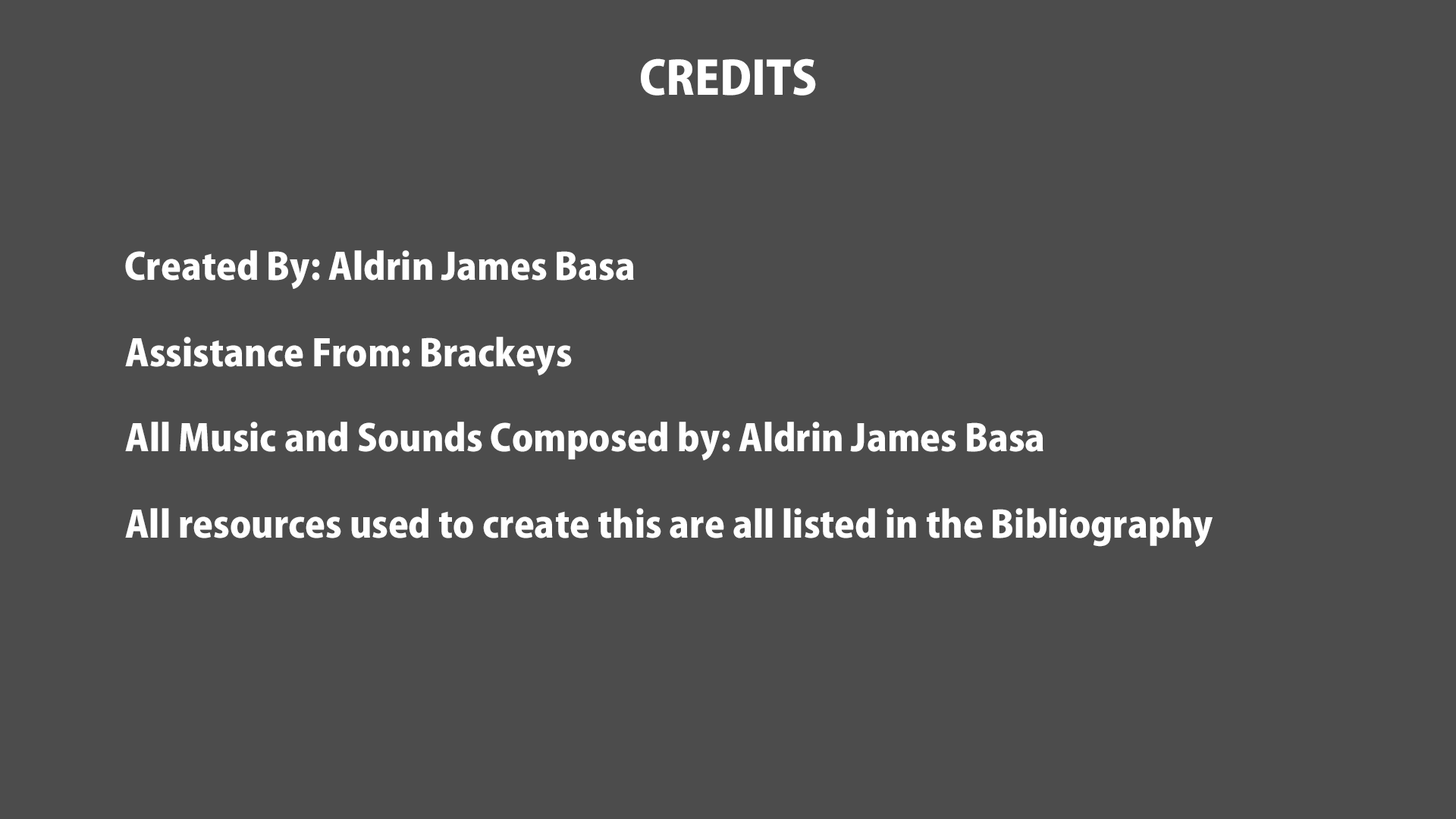
<style>
.page{position:relative;width:1456px;height:819px;background:#4c4c4c}
.page>*{position:absolute;margin:0}
.t1{font:45.5px "KozGoPr6N-Heavy";color:#ffffff}
.t2{font:36.4px "KozGoPr6N-Heavy";color:#ffffff}
</style>
<div class="page">
<p class="t1" style="left:641px;top:58px;width:175px;height:38px">CREDITS</p>
<p class="t2" style="left:125px;top:250px;width:509px;height:39px">Created By: Aldrin James Basa</p>
<p class="t2" style="left:125px;top:337px;width:447px;height:38px">Assistance From: Brackeys</p>
<p class="t2" style="left:125px;top:422px;width:918px;height:38px">All Music and Sounds Composed by: Aldrin James Basa</p>
<p class="t2" style="left:125px;top:508px;width:1088px;height:39px">All resources used to create this are all listed in the Bibliography</p>
</div>
